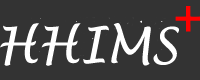
<style>
.page{position:relative;width:200px;height:80px;background:#333333}
.page>*{position:absolute;margin:0}
.t1{font:48px "LucidaHandwriting-Italic";color:#ffffff}
</style>
<div class="page">
<p class="t1" style="left:0px;top:23px;width:179px;height:43px">HHIMS</p>
</div>
